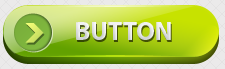
<style>
.page{position:relative;width:225px;height:69px}
.page>*{position:absolute;margin:0}
.t1{font:26px "MyriadPro-Bold";color:#e6e7e8}
</style>
<div class="page">
<p class="t1" style="left:76px;top:22px;width:95px;height:18px">BUTTON</p>
</div>
